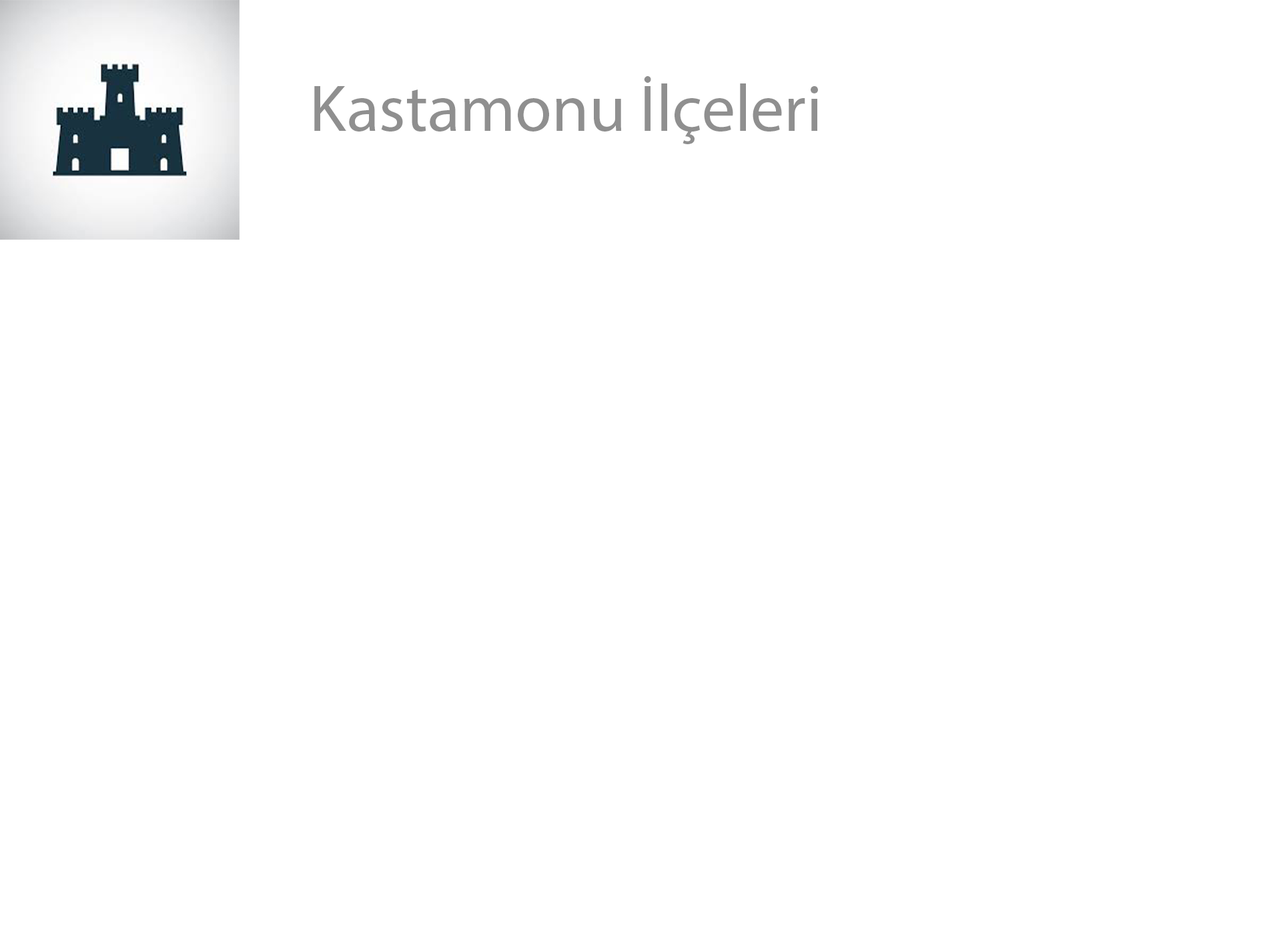
<style>
.page{position:relative;width:1261px;height:946px;background:#ffffff}
.page>*{position:absolute;margin:0}
.t1{font:66.7px "MyriadPro-Regular";color:#8f8f8f}
</style>
<div class="page">
<p class="t1" style="left:314px;top:76px;width:504px;height:68px">Kastamonu İlçeleri</p>
</div>
